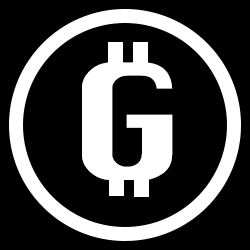
<style>
.page{position:relative;width:250px;height:250px;background:#000000}
.page>*{position:absolute;margin:0}
.t1{font:156.6px "Krungthep";letter-spacing:-0.02em;color:#ffffff;scale:1.15 1}
</style>
<div class="page">
<p class="t1" style="left:82px;top:62px;width:91px;height:118px">G</p>
</div>
